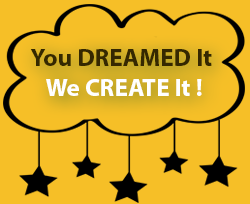
<style>
.page{position:relative;width:250px;height:204px;background:#f6bf27}
.page>*{position:absolute;margin:0}
.t1{font:25px "MyriadPro-Bold";color:#352801}
.t2{font:25px "MyriadPro-Bold";color:#ffffff}
</style>
<div class="page">
<p class="t1" style="left:30px;top:49px;width:182px;height:47px;text-align:center">You DREAMED It <br><span class="t2">We CREATE It !</span></p>
</div>
